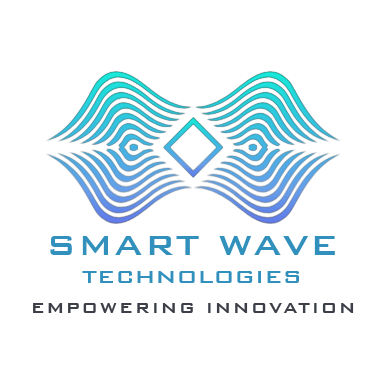
<style>
.page{position:relative;width:385px;height:385px;background:#ffffff}
.page>*{position:absolute;margin:0}
.t1{font:24px "BankGothicBT-Medium";color:#3290bd;text-transform:uppercase}
.t2{font:37.3px "BankGothicBT-Medium";letter-spacing:0.05em;color:#3290bd;text-transform:uppercase}
.t3{font:18.7px "BankGothicBT-Medium";letter-spacing:0.1em;color:#3c3e48;text-transform:uppercase}
</style>
<div class="page">
<p class="t1" style="left:50px;top:236px;width:285px;height:47px;text-align:center"><span class="t2">smart wave<br></span>technologies</p>
<p class="t3" style="left:33px;top:303px;width:321px;height:10px">empowering innovation</p>
</div>
